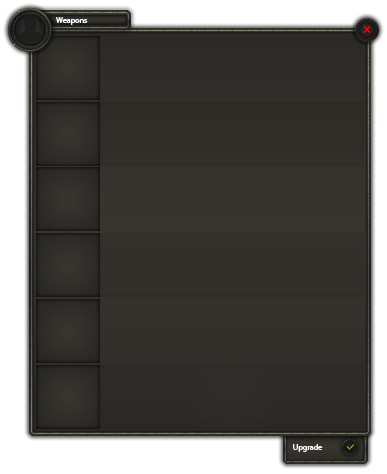
<style>
.page{position:relative;width:387px;height:474px}
.page>*{position:absolute;margin:0}
.t1{font:8px "MyriadPro-Regular";color:#fefefe}
</style>
<div class="page">
<p class="t1" style="left:56px;top:17px;width:32px;height:8px">Weapons</p>
</div>
